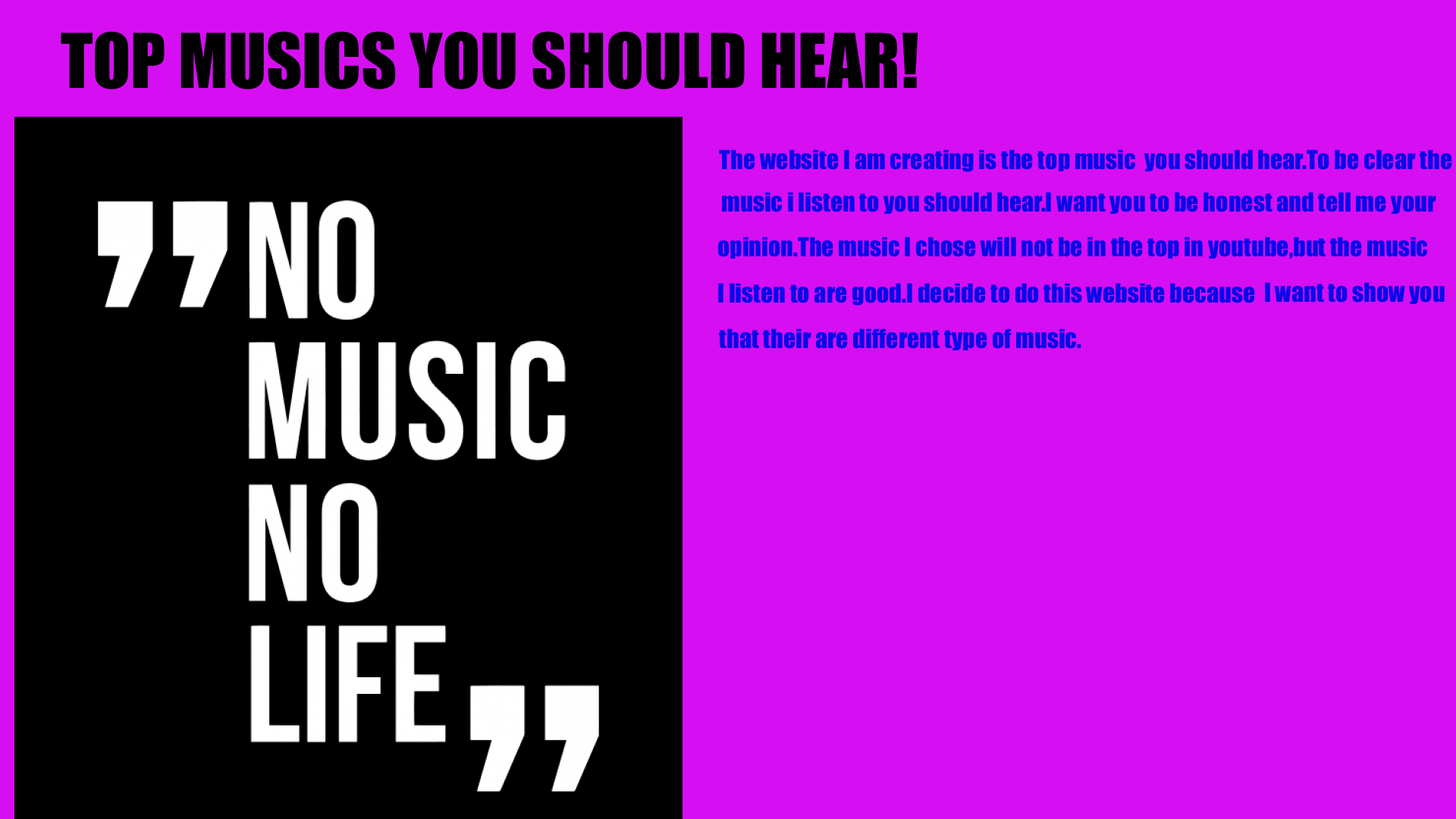
<style>
.page{position:relative;width:1456px;height:819px;background:#d50ff2}
.page>*{position:absolute;margin:0}
.t1{font:69.8px "Impact";color:#000000}
.t2{font:24.3px "Impact";color:#0808e8}
</style>
<div class="page">
<p class="t1" style="left:61px;top:31px;width:857px;height:58px">TOP MUSICS YOU SHOULD HEAR!</p>
<p class="t2" style="left:719px;top:149px;width:733px;height:23px">The website I am creating is the top music  you should hear.To be clear the</p>
<p class="t2" style="left:722px;top:192px;width:714px;height:22px">music i listen to you should hear.I want you to be honest and tell me your</p>
<p class="t2" style="left:718px;top:237px;width:709px;height:22px">opinion.The music I chose will not be in the top in youtube,but the music</p>
<p class="t2" style="left:718px;top:283px;width:537px;height:23px">I listen to are good.I decide to do this website because</p>
<p class="t2" style="left:1265px;top:282px;width:180px;height:22px">I want to show you</p>
<p class="t2" style="left:719px;top:328px;width:362px;height:22px">that their are different type of music.</p>
</div>
